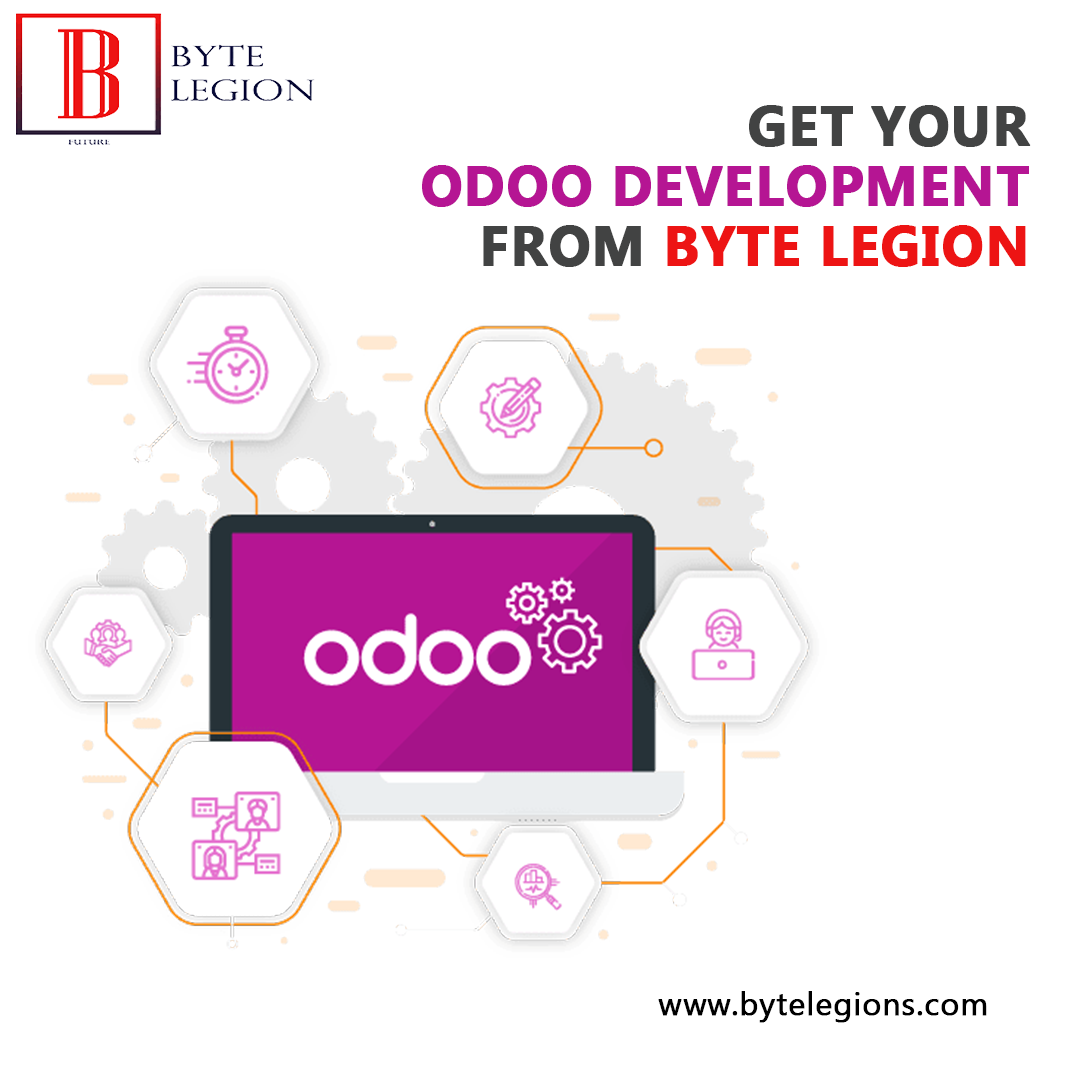
<style>
.page{position:relative;width:1080px;height:1080px;background:#ffffff}
.page>*{position:absolute;margin:0}
.t1{font:55px/60px "MyanmarText-Bold";letter-spacing:0.01em;color:#b51593;text-transform:uppercase;font-weight:bold}
.t2{font:55px/60px "MyanmarText-Bold";letter-spacing:0.01em;color:#424343;text-transform:uppercase;font-weight:bold}
.t3{font:55px/60px "MyanmarText-Bold";letter-spacing:0.01em;color:#ed1414;text-transform:uppercase;font-weight:bold}
.t4{font:32px "MyanmarText";letter-spacing:0.01em;color:#000000;font-weight:bold}
</style>
<div class="page">
<p class="t1" style="left:422px;top:105px;width:609px;height:162px;text-align:right"><span class="t2">Get your<br>    </span>odoo development<br><span class="t2">from</span><span class="t3"> Byte legion</span></p>
<p class="t4" style="left:658px;top:991px;width:329px;height:32px">www.bytelegions.com</p>
</div>
